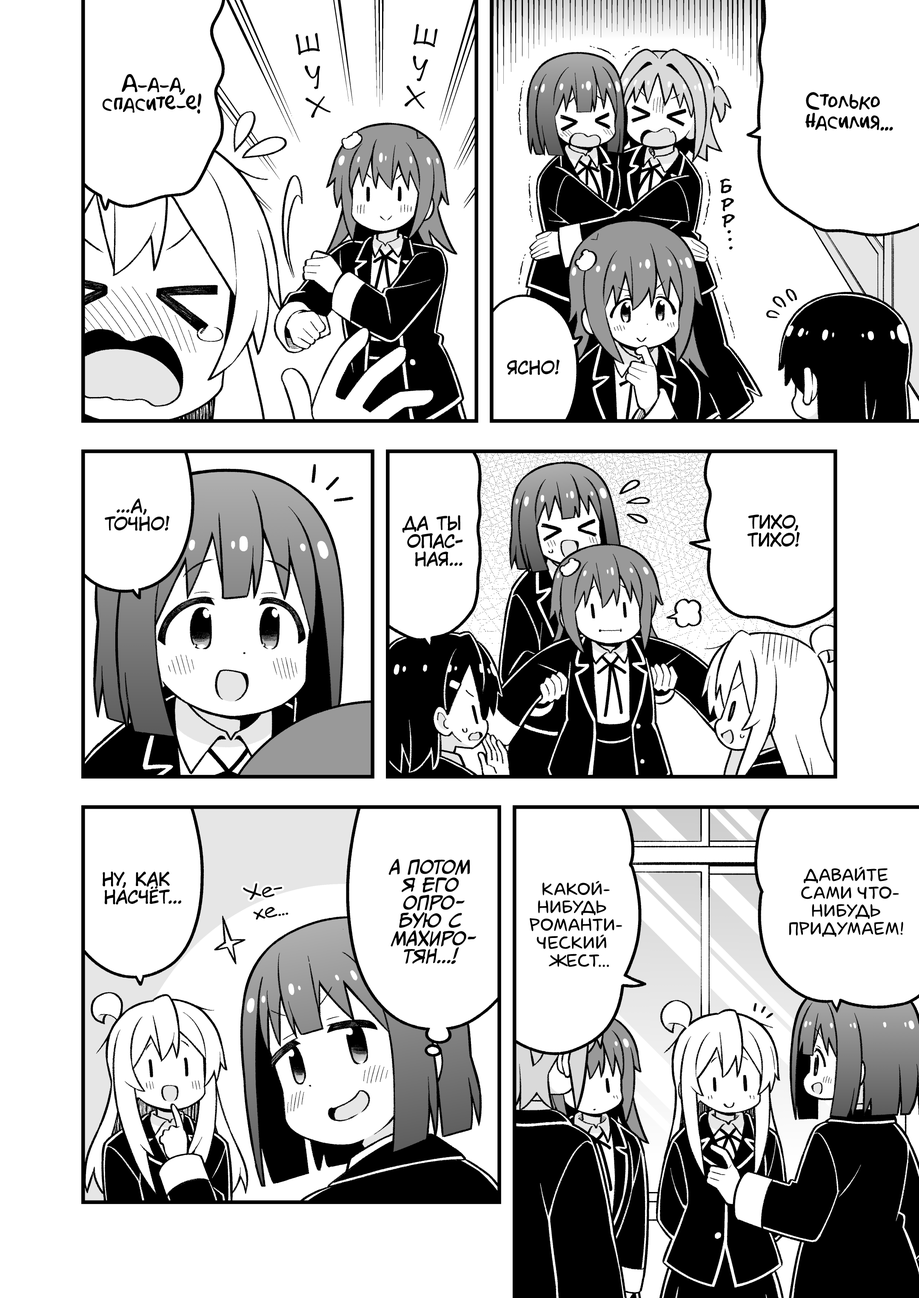
<style>
.page{position:relative;width:919px;height:1298px;background:#ffffff}
.page>*{position:absolute;margin:0}
.t1{font:30.6px "DSNote";color:#000000;text-transform:uppercase}
.t2{font:20.4px "AkbarPlain";color:#000000}
.t3{font:20.4px "el_CCEvilSchemes";color:#000000}
.t4{font:17.9px "KuraiVoice2";color:#000000;text-transform:uppercase}
.t5{font:17.9px "CCMeanwhile";color:#000000;text-transform:uppercase;font-style:italic}
.t6{font:17.9px "laCartoonerie";color:#000000;text-transform:uppercase}
.t7{font:20.4px "v_Augie";color:#000000}
</style>
<div class="page">
<p class="t1" style="left:413px;top:24px;width:25px;height:23px;rotate:9deg">ш</p>
<p class="t1" style="left:296px;top:33px;width:24px;height:22px;rotate:-8deg">ш</p>
<p class="t1" style="left:305px;top:65px;width:15px;height:24px;rotate:-9deg">у</p>
<p class="t1" style="left:413px;top:55px;width:15px;height:26px;rotate:6deg">у</p>
<p class="t2" style="left:103px;top:74px;width:99px;height:40px;text-align:center">А-а-а,<br>спасите-е!</p>
<p class="t1" style="left:405px;top:86px;width:20px;height:23px;rotate:9deg">х</p>
<p class="t1" style="left:305px;top:96px;width:26px;height:22px;rotate:-16deg">х</p>
<p class="t2" style="left:805px;top:92px;width:88px;height:39px;text-align:center">Столько<br>насилия...</p>
<p class="t3" style="left:720px;top:178px;width:12px;height:15px">б</p>
<p class="t3" style="left:721px;top:198px;width:13px;height:13px">р</p>
<p class="t3" style="left:722px;top:214px;width:13px;height:14px">р</p>
<p class="t3" style="left:728px;top:230px;width:3px;height:4px">.</p>
<p class="t3" style="left:728px;top:238px;width:4px;height:3px">.</p>
<p class="t3" style="left:729px;top:246px;width:4px;height:4px">.</p>
<p class="t4" style="left:507px;top:359px;width:52px;height:16px">Ясно!</p>
<p class="t4" style="left:105px;top:498px;width:64px;height:33px;text-align:center">...А,<br>точно!</p>
<p class="t4" style="left:402px;top:515px;width:61px;height:52px;text-align:center">Да ты<br>опас-<br>ная...</p>
<p class="t4" style="left:747px;top:514px;width:53px;height:33px;text-align:center">Тихо,<br>тихо!</p>
<p class="t5" style="left:388px;top:859px;width:88px;height:105px;text-align:center">А потом<br>я его<br>опро-<br>бую с<br>Махиро-<br>тян...!</p>
<p class="t6" style="left:789px;top:867px;width:114px;height:70px;text-align:center">Давайте<br>сами что-<br>нибудь<br>придумаем!</p>
<p class="t4" style="left:103px;top:871px;width:78px;height:33px;text-align:center">Ну, как<br>насчёт...</p>
<p class="t6" style="left:530px;top:881px;width:92px;height:86px;text-align:center">Какой-<br>нибудь<br>романти-<br>ческий<br>жест...</p>
<p class="t7" style="left:243px;top:883px;width:45px;height:36px;text-align:center;rotate:-10deg">Хе-<br>хе...</p>
</div>
